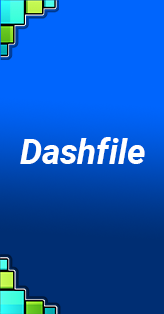
<style>
.page{position:relative;width:164px;height:314px;background:#0065fd}
.page>*{position:absolute;margin:0}
.t1{font:34.6px "Roboto-BoldItalic";color:#ffffff}
</style>
<div class="page">
<p class="t1" style="left:20px;top:137px;width:125px;height:27px">Dashfile</p>
</div>
